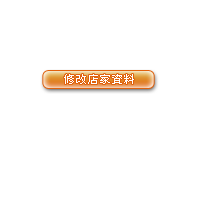
<style>
.page{position:relative;width:200px;height:200px;background:#ffffff}
.page>*{position:absolute;margin:0}
.t1{font:11px "MingLiU";color:#ffffff}
</style>
<div class="page">
<p class="t1" style="left:64px;top:74px;width:70px;height:10px">修改店家資料</p>
</div>
